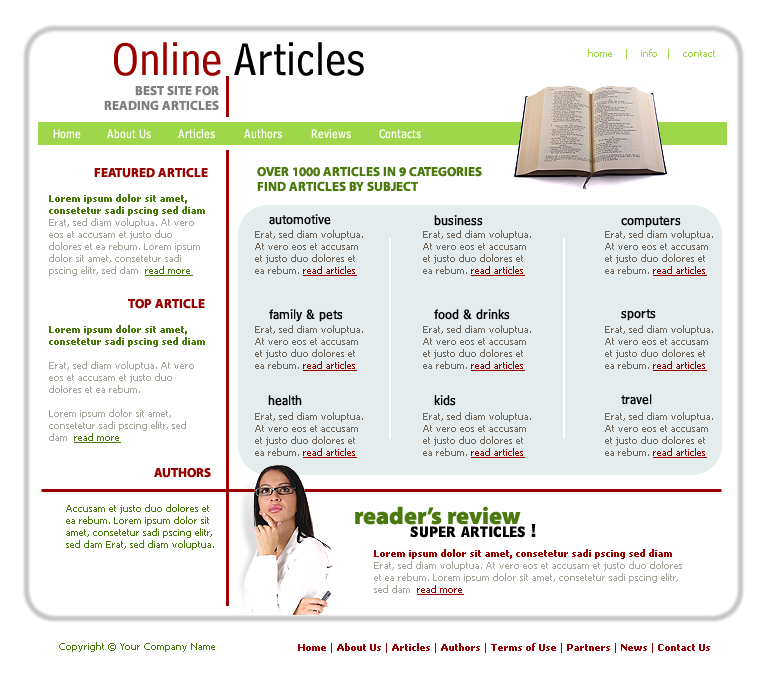
<style>
.page{position:relative;width:775px;height:680px;background:#ffffff}
.page>*{position:absolute;margin:0}
.t1{font:48px "BellCentennialBT-Address";color:#000000}
.t2{font:48px "BellCentennialBT-Address";color:#990100}
.t3{font:10px "Tahoma";color:#9ed749}
.t4{font:13px/14.8px "MyriadPro-Bold";color:#7f7f7f;text-transform:uppercase}
.t5{font:13px "BellCentennialBT-Address";color:#ffffff}
.t6{font:13px "MyriadPro-Bold";color:#990100;text-transform:uppercase}
.t7{font:13px/14.8px "MyriadPro-Bold";color:#4a7a0d;text-transform:uppercase}
.t8{font:10px "Tahoma";color:#a3a89c}
.t9{font:10px "Tahoma-Bold";color:#4a7a0d}
.t10{font:10px "Tahoma";color:#4a7a0d;text-decoration:underline}
.t11{font:14px "BellCentennialBT-SubCaption";color:#000000}
.t12{font:10px "Tahoma";color:#70675d}
.t13{font:10px "Tahoma";color:#990100;text-decoration:underline}
.t14{font:10px "Tahoma";color:#4a7a0d}
.t15{font:24px "MyriadPro-Black";color:#4a7a0d}
.t16{font:15px "BellCentennialBT-BoldListing";color:#000000}
.t17{font:10px "Tahoma-Bold";color:#990100}
.t18{font:10px "Tahoma";color:#990100}
</style>
<div class="page">
<p class="t1" style="left:114px;top:42px;width:250px;height:34px"><span class="t2">Online </span>Articles</p>
<p class="t3" style="left:588px;top:49px;width:127px;height:10px">home    |    info   |    contact</p>
<p class="t4" style="left:104px;top:86px;width:115px;height:24px;text-align:right">BEST SITE FOR<br>READING ARTICLES</p>
<p class="t5" style="left:53px;top:129px;width:28px;height:10px">Home</p>
<p class="t5" style="left:107px;top:129px;width:44px;height:10px">About Us</p>
<p class="t5" style="left:178px;top:129px;width:37px;height:10px">Articles</p>
<p class="t5" style="left:244px;top:129px;width:38px;height:10px">Authors</p>
<p class="t5" style="left:311px;top:129px;width:40px;height:10px">Reviews</p>
<p class="t5" style="left:379px;top:129px;width:42px;height:10px">Contacts</p>
<p class="t6" style="left:94px;top:168px;width:114px;height:10px">FEATURED ARTICLE</p>
<p class="t7" style="left:257px;top:167px;width:225px;height:24px">OVER 1000 ARTICLES IN 9 CATEGORIES<br>FIND ARTICLES BY SUBJECT</p>
<p class="t8" style="left:49px;top:194px;width:156px;height:82px"><span class="t9">Lorem ipsum dolor sit amet, consetetur sadi pscing sed diam<br></span>Erat, sed diam voluptua. At vero eos et accusam et justo duo dolores et ea rebum. Lorem ipsum dolor sit amet, consetetur sadi pscing elitr, sed dam  <span class="t10">read more</span></p>
<p class="t11" style="left:269px;top:214px;width:62px;height:11px">automotive</p>
<p class="t11" style="left:434px;top:215px;width:49px;height:11px">business</p>
<p class="t11" style="left:621px;top:216px;width:60px;height:12px">computers</p>
<p class="t12" style="left:255px;top:230px;width:108px;height:46px">Erat, sed diam voluptua. At vero eos et accusam et justo duo dolores et ea rebum. <span class="t13">read articles</span></p>
<p class="t12" style="left:423px;top:230px;width:108px;height:46px">Erat, sed diam voluptua. At vero eos et accusam et justo duo dolores et ea rebum. <span class="t13">read articles</span></p>
<p class="t12" style="left:605px;top:230px;width:108px;height:46px">Erat, sed diam voluptua. At vero eos et accusam et justo duo dolores et ea rebum. <span class="t13">read articles</span></p>
<p class="t6" style="left:128px;top:299px;width:77px;height:10px">TOP ARTICLE</p>
<p class="t11" style="left:269px;top:309px;width:74px;height:13px">family &amp; pets</p>
<p class="t11" style="left:434px;top:309px;width:76px;height:11px">food &amp; drinks</p>
<p class="t11" style="left:621px;top:309px;width:35px;height:12px">sports</p>
<p class="t8" style="left:49px;top:325px;width:156px;height:118px"><span class="t9">Lorem ipsum dolor sit amet, consetetur sadi pscing sed diam<br><br></span>Erat, sed diam voluptua. At vero eos et accusam et justo duo dolores et ea rebum. <br><br>Lorem ipsum dolor sit amet, consetetur sadi pscing elitr, sed dam  <span class="t10">read more</span></p>
<p class="t12" style="left:255px;top:325px;width:108px;height:46px">Erat, sed diam voluptua. At vero eos et accusam et justo duo dolores et ea rebum. <span class="t13">read articles</span></p>
<p class="t12" style="left:423px;top:325px;width:108px;height:46px">Erat, sed diam voluptua. At vero eos et accusam et justo duo dolores et ea rebum. <span class="t13">read articles</span></p>
<p class="t12" style="left:605px;top:325px;width:108px;height:46px">Erat, sed diam voluptua. At vero eos et accusam et justo duo dolores et ea rebum. <span class="t13">read articles</span></p>
<p class="t11" style="left:268px;top:395px;width:34px;height:11px">health</p>
<p class="t11" style="left:434px;top:395px;width:22px;height:11px">kids</p>
<p class="t11" style="left:621px;top:394px;width:31px;height:11px">travel</p>
<p class="t12" style="left:255px;top:412px;width:108px;height:46px">Erat, sed diam voluptua. At vero eos et accusam et justo duo dolores et ea rebum. <span class="t13">read articles</span></p>
<p class="t12" style="left:423px;top:412px;width:108px;height:46px">Erat, sed diam voluptua. At vero eos et accusam et justo duo dolores et ea rebum. <span class="t13">read articles</span></p>
<p class="t12" style="left:605px;top:412px;width:108px;height:46px">Erat, sed diam voluptua. At vero eos et accusam et justo duo dolores et ea rebum. <span class="t13">read articles</span></p>
<p class="t6" style="left:154px;top:468px;width:57px;height:10px">AUTHORS</p>
<p class="t14" style="left:66px;top:504px;width:148px;height:46px">Accusam et justo duo dolores et ea rebum. Lorem ipsum dolor sit amet, consetetur sadi pscing elitr, sed dam Erat, sed diam voluptua.</p>
<p class="t15" style="left:355px;top:506px;width:166px;height:19px">reader’s review</p>
<p class="t16" style="left:410px;top:524px;width:126px;height:14px">super articles !</p>
<p class="t8" style="left:374px;top:549px;width:308px;height:46px"><span class="t17">Lorem ipsum dolor sit amet, consetetur sadi pscing sed diam<br></span>Erat, sed diam voluptua. At vero eos et accusam et justo duo dolores et ea rebum. Lorem ipsum dolor sit amet, consetetur sadi pscing elitr, sed dam  <span class="t13">read more</span></p>
<p class="t14" style="left:59px;top:642px;width:156px;height:10px">Copyright © Your Company Name</p>
<p class="t17" style="left:298px;top:643px;width:412px;height:10px"><span class="t18">  </span>Home<span class="t18"> | </span>About Us <span class="t18">| </span>Articles <span class="t18">| </span>Authors <span class="t18">| </span>Terms of Use <span class="t18">| </span>Partners <span class="t18">| </span>News<span class="t18"> | </span>Contact Us</p>
</div>
